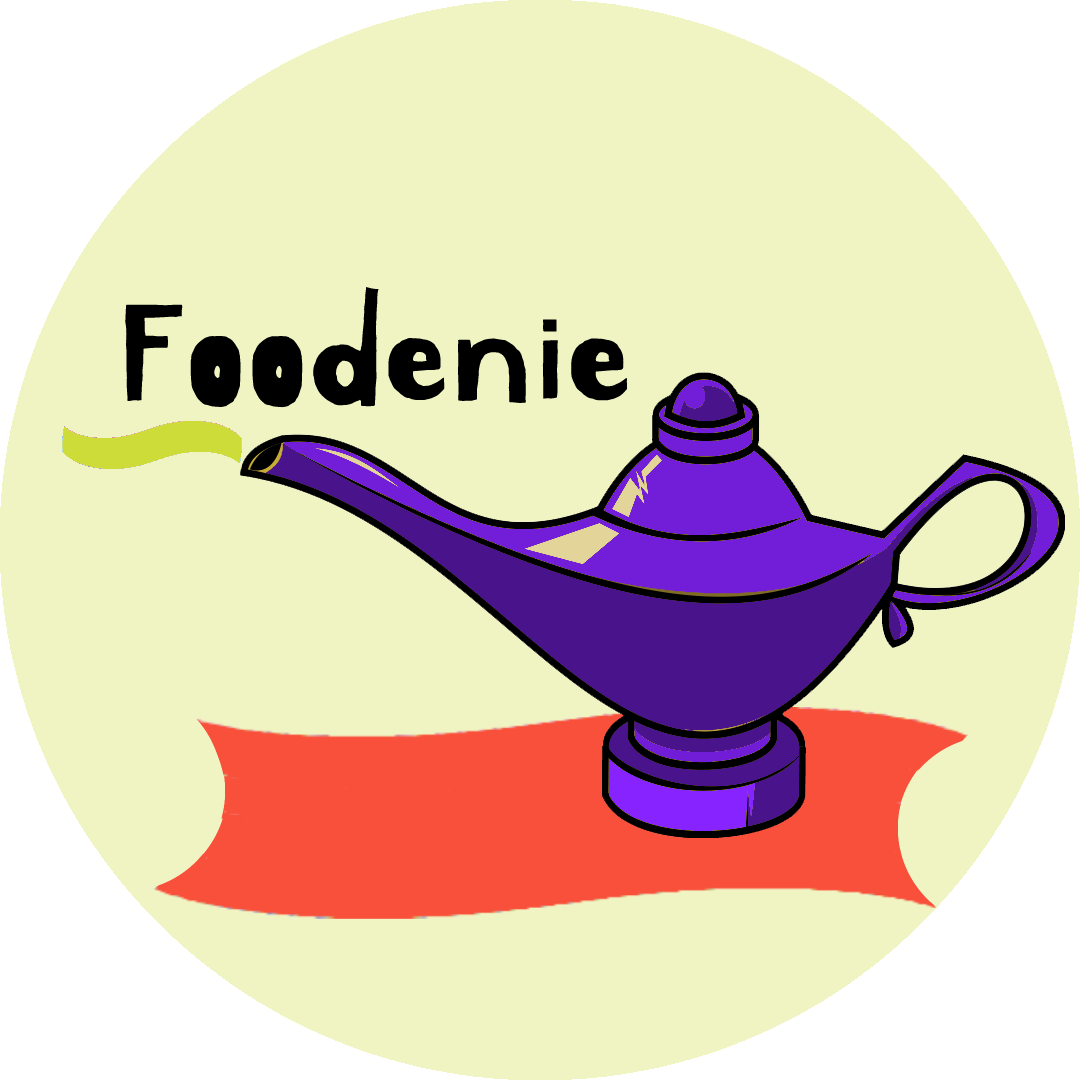
<style>
.page{position:relative;width:1080px;height:1080px;background:#f0f4c3}
.page>*{position:absolute;margin:0}
.t1{font:168.6px "KirangHaerang-Regular";color:#000000}
</style>
<div class="page">
<p class="t1" style="left:125px;top:287px;width:502px;height:121px">Foodenie</p>
</div>
